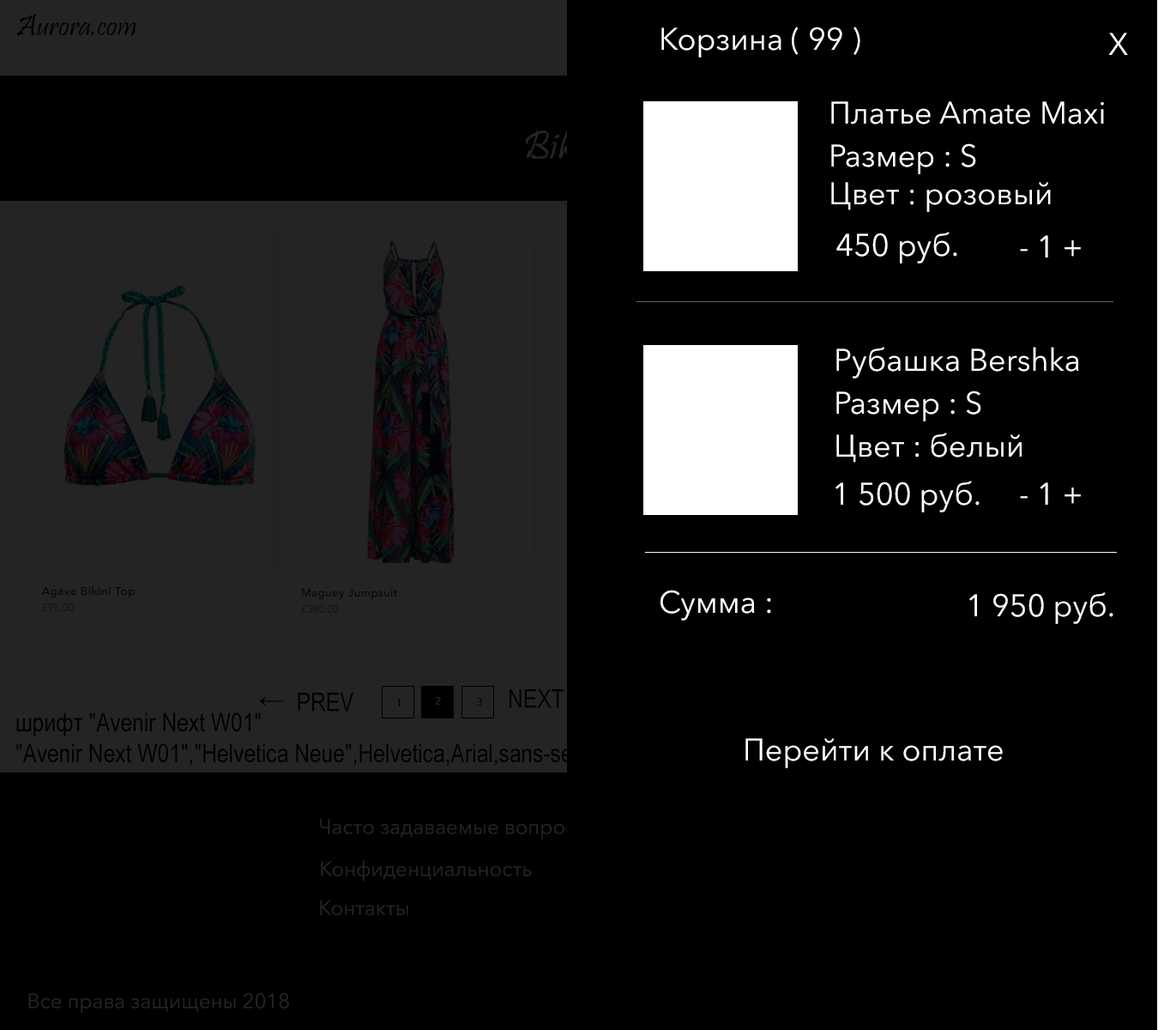
<style>
.page{position:relative;width:1158px;height:1030px;background:#000000}
.page>*{position:absolute;margin:0}
.t1{font:30.9px "Pristina-Regular";color:#000000}
.t2{font:30.9px "AvenirNextCyr-Regular";color:#ffffff}
.t3{font:41.2px "Pristina-Regular"}
.t4{font:25.7px "ArialNarrow";color:#000000}
.t5{font:12px "Raavi";color:#000000}
.t6{font:12px "Raavi";color:#242424}
.t7{font:12px "Raavi";color:#010000}
.t8{font:20.6px "AvenirNextCyr-Regular";color:#242424}
</style>
<div class="page">
<p class="t1" style="left:16px;top:14px;width:120px;height:22px">Aurora.com</p>
<p class="t2" style="left:661px;top:27px;width:200px;height:30px">Корзина ( 99 )</p>
<p class="t2" style="left:1108px;top:33px;width:20px;height:22px">X</p>
<p class="t2" style="left:831px;top:101px;width:273px;height:23px">Платье Amate Maxi</p>
<p class="t3" style="left:525px;top:124px;width:84px;height:39px">Bikini</p>
<p class="t2" style="left:831px;top:143px;width:145px;height:31px">Размер : S</p>
<p class="t2" style="left:831px;top:182px;width:220px;height:30px">Цвет : розовый</p>
<p class="t2" style="left:836px;top:232px;width:121px;height:31px">450 руб.</p>
<p class="t2" style="left:1020px;top:235px;width:61px;height:22px">- 1 +</p>
<p class="t2" style="left:836px;top:347px;width:243px;height:31px">Рубашка Bershka</p>
<p class="t2" style="left:836px;top:390px;width:145px;height:31px">Размер : S</p>
<p class="t2" style="left:836px;top:432px;width:186px;height:30px">Цвет : белый</p>
<p class="t2" style="left:836px;top:480px;width:144px;height:32px">1 500 руб.</p>
<p class="t2" style="left:1020px;top:482px;width:61px;height:22px">- 1 +</p>
<p class="t2" style="left:661px;top:589px;width:110px;height:31px">Сумма :</p>
<p class="t2" style="left:969px;top:592px;width:145px;height:32px">1 950 руб.</p>
<p class="t4" style="left:510px;top:689px;width:54px;height:19px">NEXT</p>
<p class="t4" style="left:259px;top:696px;width:25px;height:10px">←</p>
<p class="t4" style="left:298px;top:692px;width:55px;height:19px">PREV</p>
<p class="t5" style="left:397px;top:698px;width:3px;height:8px">1</p>
<p class="t6" style="left:436px;top:697px;width:5px;height:7px">2</p>
<p class="t7" style="left:477px;top:698px;width:5px;height:8px">3</p>
<p class="t4" style="left:16px;top:712px;width:576px;height:54px;text-align:right">шрифт "Avenir Next W01"<br>"Avenir Next W01","Helvetica Neue",Helvetica,Arial,sans-serif</p>
<p class="t2" style="left:746px;top:738px;width:257px;height:30px">Перейти к оплате</p>
<p class="t8" style="left:320px;top:818px;width:269px;height:21px">Часто задаваемые вопросы</p>
<p class="t8" style="left:321px;top:860px;width:211px;height:21px">Конфиденциальность</p>
<p class="t8" style="left:320px;top:900px;width:88px;height:15px">Контакты</p>
<p class="t8" style="left:28px;top:993px;width:261px;height:20px">Все права защищены 2018</p>
</div>
